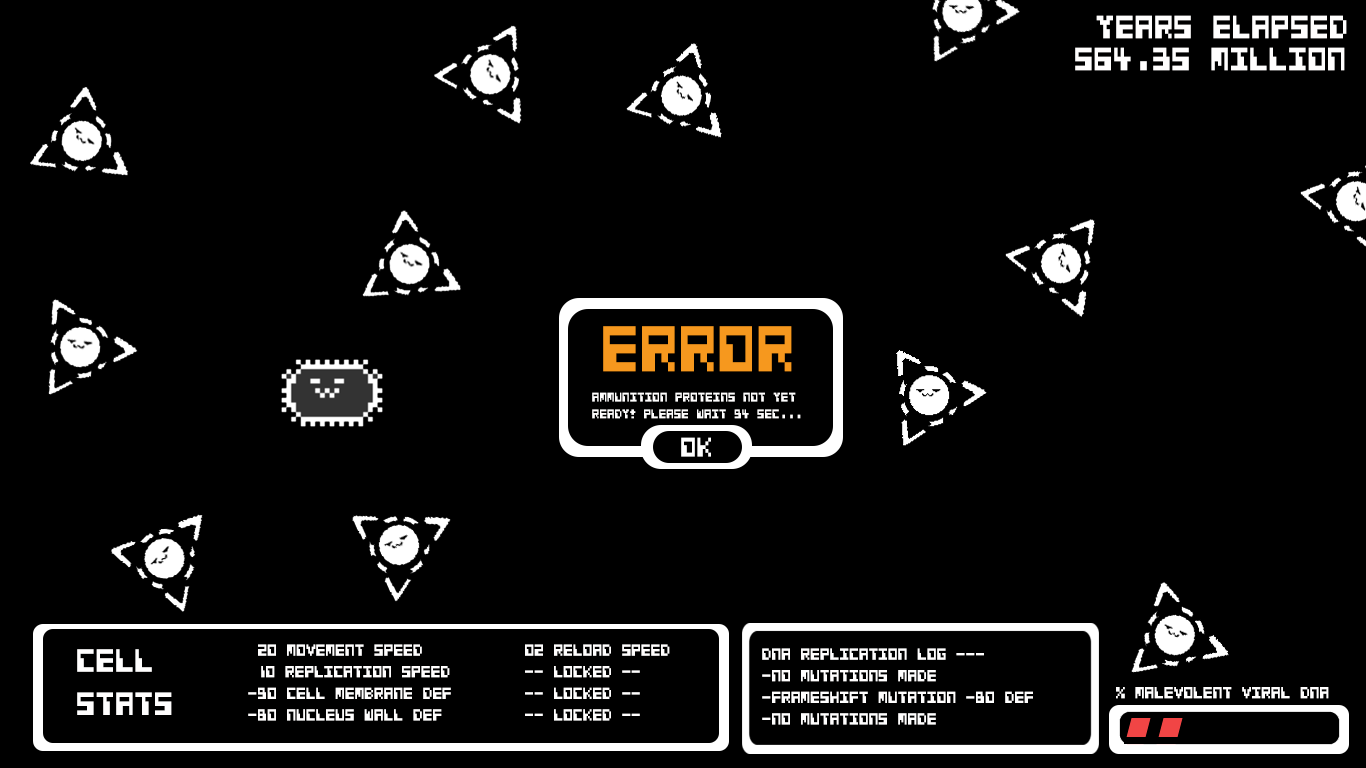
<style>
.page{position:relative;width:1366px;height:768px;background:#000000}
.page>*{position:absolute;margin:0}
.t1{font:36px "CosmicAlien";color:#fffefe;scale:0.72 1}
.t2{font:18px "CosmicAlien";color:#fffefe;scale:0.72 1}
</style>
<div class="page">
<p class="t1" style="left:1096px;top:15px;width:251px;height:24px">Years Elapsed</p>
<p class="t1" style="left:1075px;top:47px;width:270px;height:24px">564.35 million</p>
<p class="t1" style="left:77px;top:649px;width:95px;height:66px">Cell<br>stats</p>
<p class="t2" style="left:248px;top:644px;width:203px;height:77px">20 movement speed<br> 10 replication speed<br>-90 cell membrane def<br>-80 nucleus wall def<br>-50 reload speed</p>
<p class="t2" style="left:525px;top:644px;width:145px;height:77px">02 reload speed<br> -- LOCKED --<br> -- LOCKED --<br> -- LOCKED --</p>
<p class="t2" style="left:762px;top:648px;width:271px;height:77px">DNA replication log --- <br>-no mutations made<br>-Frameshift mutation -80 def<br>-no mutations made<br>-</p>
<p class="t2" style="left:1116px;top:687px;width:213px;height:12px">% malevolent viral DNA</p>
</div>
